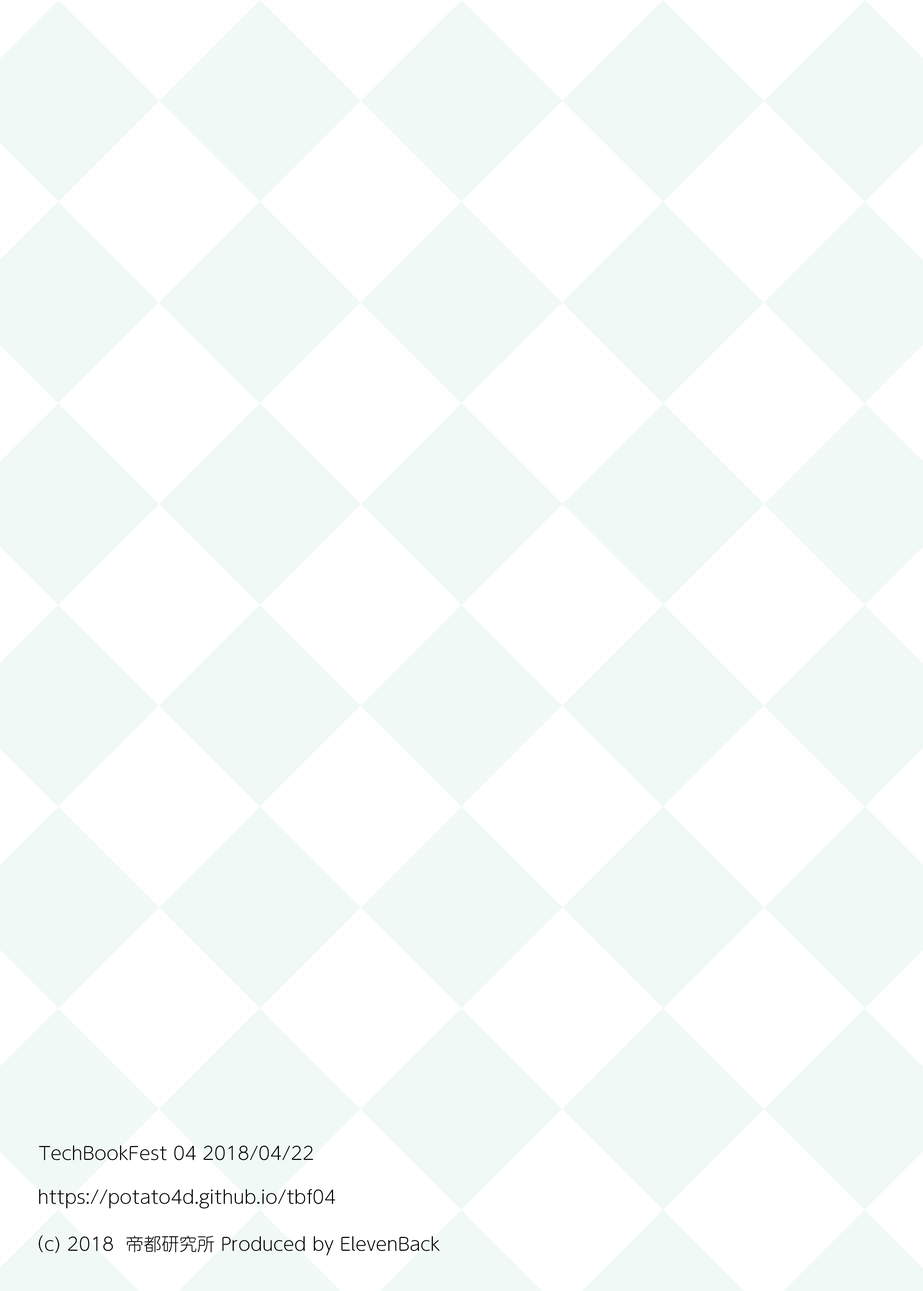
<style>
.page{position:relative;width:923px;height:1291px;background:#f0f9f5}
.page>*{position:absolute;margin:0}
.t1{font:17.8px "UDShinMGoPr6N-Light";color:#000000}
</style>
<div class="page">
<p class="t1" style="left:39px;top:1146px;width:274px;height:15px">TechBookFest 04 2018/04/22</p>
<p class="t1" style="left:39px;top:1190px;width:296px;height:19px">https://potato4d.github.io/tbf04</p>
<p class="t1" style="left:38px;top:1236px;width:402px;height:20px">（c) 2018  帝都研究所 Produced by ElevenBack</p>
</div>
